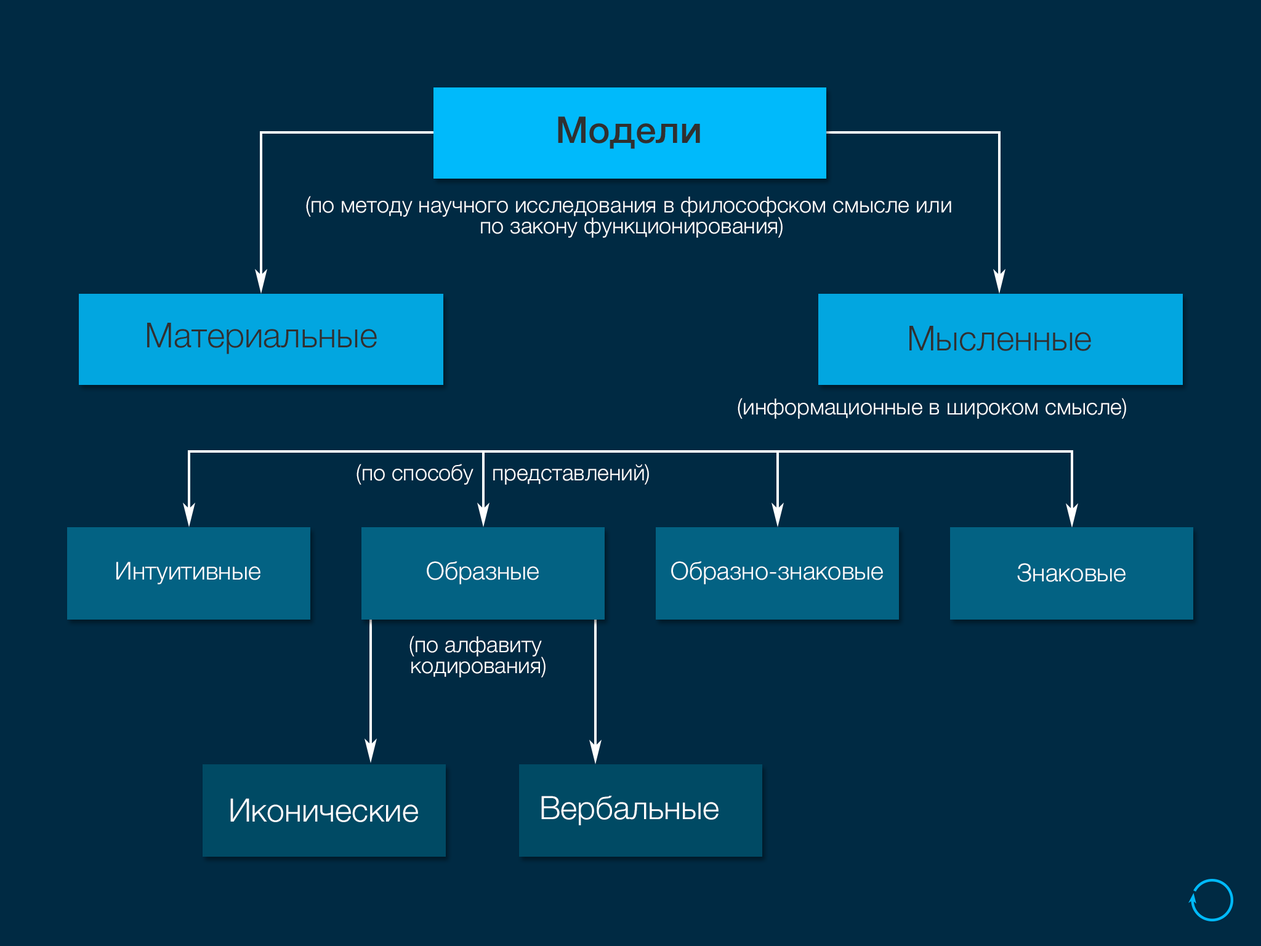
<style>
.page{position:relative;width:1261px;height:946px;background:#002a43}
.page>*{position:absolute;margin:0}
.t1{font:36.9px "HelveticaNeue-Medium";color:#303030}
.t2{font:22.2px/20.9px "HelveticaNeue-Light";color:#ffffff}
.t3{font:34.5px "HelveticaNeue-Light";color:#303030}
.t4{font:22.2px "HelveticaNeue-Light";color:#ffffff}
.t5{font:24.6px "HelveticaNeue-Light";color:#ffffff}
.t6{font:32px "HelveticaNeue-Light";color:#ffffff}
</style>
<div class="page">
<p class="t1" style="left:558px;top:116px;width:142px;height:33px">Модели</p>
<p class="t2" style="left:306px;top:196px;width:645px;height:42px;text-align:center">(по методу научного исследования в философском смысле или <br>по закону функционирования)</p>
<p class="t3" style="left:147px;top:323px;width:230px;height:31px">Материальные</p>
<p class="t3" style="left:909px;top:326px;width:182px;height:25px">Мысленные</p>
<p class="t4" style="left:738px;top:398px;width:388px;height:21px">(информационные в широком смысле)</p>
<p class="t4" style="left:356px;top:464px;width:293px;height:21px">(по способу   представлений)</p>
<p class="t5" style="left:116px;top:562px;width:144px;height:22px">Интуитивные</p>
<p class="t5" style="left:427px;top:561px;width:112px;height:23px">Образные</p>
<p class="t5" style="left:671px;top:561px;width:212px;height:23px">Образно-знаковые</p>
<p class="t5" style="left:1017px;top:563px;width:108px;height:19px">Знаковые</p>
<p class="t2" style="left:409px;top:635px;width:136px;height:42px;text-align:center">(по алфавиту <br>кодирования)</p>
<p class="t6" style="left:230px;top:798px;width:188px;height:24px">Иконические</p>
<p class="t6" style="left:541px;top:795px;width:178px;height:30px">Вербальные</p>
</div>
